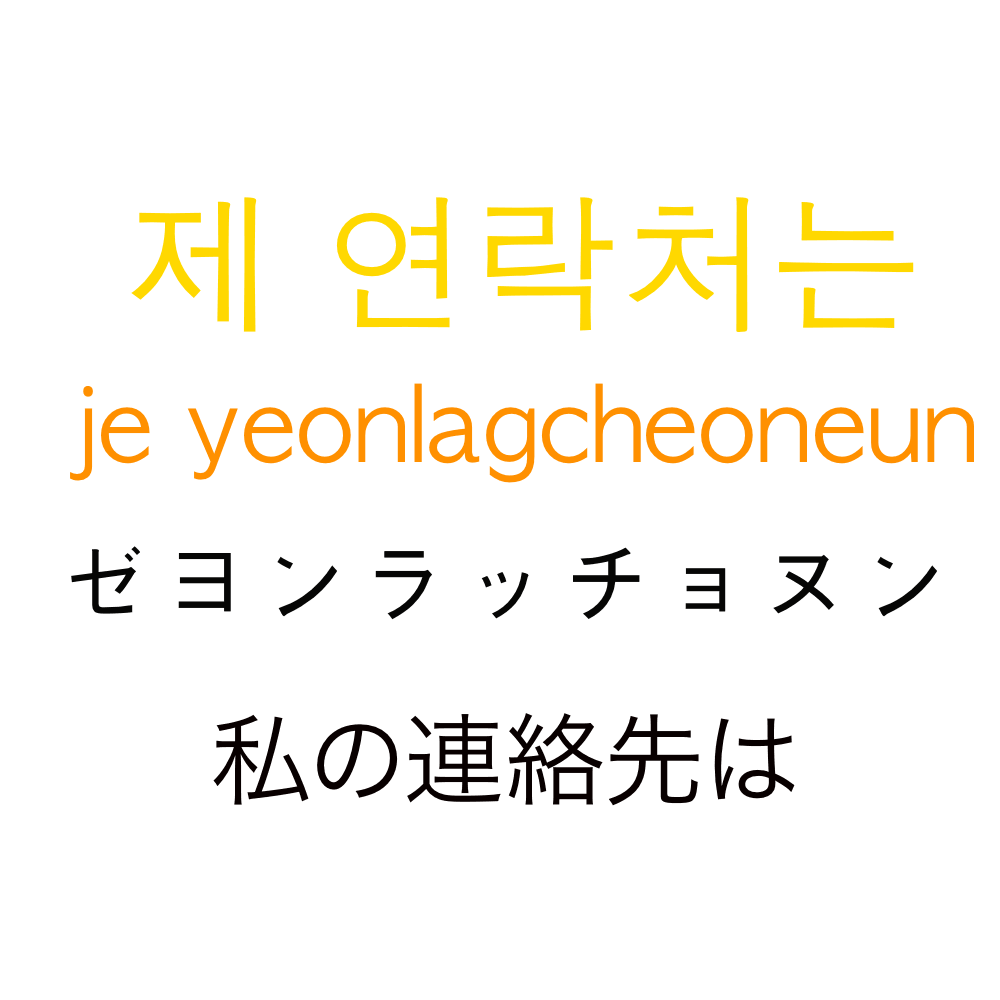
<style>
.page{position:relative;width:1000px;height:1000px;background:#ffffff}
.page>*{position:absolute;margin:0}
.t1{font:150px "AppleGothic";color:#ffd800}
.t2{font:100px "AppleGothic";color:#ff9000}
.t3{font:100px "AppleGothic";color:#060605}
.t4{font:100px "HiraKakuProN-W3";color:#080000}
</style>
<div class="page">
<p class="t1" style="left:131px;top:197px;width:783px;height:135px">제 연락처는</p>
<p class="t2" style="left:70px;top:383px;width:904px;height:100px">je yeonlagcheoneun</p>
<p class="t3" style="left:71px;top:546px;width:866px;height:74px">ゼヨンラッチョヌン</p>
<p class="t4" style="left:213px;top:713px;width:582px;height:93px">私の連絡先は</p>
</div>
